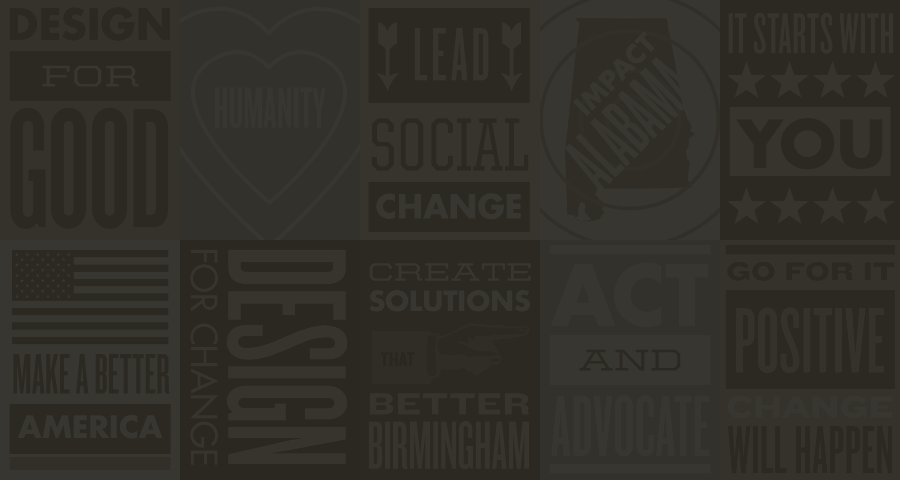
<style>
.page{position:relative;width:900px;height:480px;background:#2c2923}
.page>*{position:absolute;margin:0}
.t1{font:41.7px "FuturaStd-Bold";letter-spacing:0.005em;color:#2c2923;text-transform:uppercase}
.t2{font:60px "Knockout-46Flyweight";letter-spacing:0.005em;color:#37342e;text-transform:uppercase}
.t3{font:78.7px "Knockout-46Flyweight";letter-spacing:0.05em;color:#37342e;text-transform:uppercase}
.t4{font:25.9px "FuturaStd-Bold";letter-spacing:0.005em;color:#383630;text-transform:uppercase}
.t5{font:30px "UnitedSerifExt-Medium";letter-spacing:0.005em;color:#383630;text-transform:uppercase}
.t6{font:84.8px "Knockout-46Flyweight";letter-spacing:0.005em;color:#383630;text-transform:uppercase}
.t7{font:60px "Knockout-46Flyweight";letter-spacing:0.005em;color:#383630;text-transform:uppercase}
.t8{font:176.9px "Knockout-46Flyweight";letter-spacing:0.005em;color:#2c2923;text-transform:uppercase}
.t9{font:75.4px "UnitedSerifCond-Medium";letter-spacing:0.005em;color:#2c2923;text-transform:uppercase}
.t10{font:64.1px "FuturaStd-Bold";letter-spacing:0.005em;color:#2c2923;text-transform:uppercase}
.t11{font:32.5px "FuturaStd-Bold";letter-spacing:0.005em;color:#383630;text-transform:uppercase}
.t12{font:35.4px "FuturaStd-Medium";letter-spacing:0.005em;color:#37342e;text-transform:uppercase}
.t13{font:176px "Knockout-46Flyweight";letter-spacing:0.005em;color:#37342e;text-transform:uppercase}
.t14{font:25.3px "UnitedSerifExt-Medium";letter-spacing:0.005em;color:#383630;text-transform:uppercase}
.t15{font:81.9px "FuturaStd-Bold";letter-spacing:0.005em;color:#383630;text-transform:uppercase}
.t16{font:26.7px "Knockout-54Sumo";color:#2c2923;text-transform:uppercase}
.t17{font:27.1px "FuturaStd-Bold";letter-spacing:0.005em;color:#383630;text-transform:uppercase}
.t18{font:96.4px "Knockout-46Flyweight";letter-spacing:0.005em;color:#35322c;text-transform:uppercase}
.t19{font:20.6px "Knockout-49Liteweight";color:#292721;text-transform:uppercase}
.t20{font:30px "UnitedSerifExt-Medium";letter-spacing:0.005em;color:#2c2923;text-transform:uppercase}
.t21{font:59.5px "Knockout-46Flyweight";color:#2c2923;text-transform:uppercase}
.t22{font:31.8px "Knockout-54Sumo";color:#37342e;text-transform:uppercase}
.t23{font:90.2px "Knockout-46Flyweight";letter-spacing:0.005em;color:#383630;text-transform:uppercase}
.t24{font:30.1px "FuturaStd-Bold";letter-spacing:0.005em;color:#383630;text-transform:uppercase}
.t25{font:70.9px "Knockout-46Flyweight";color:#37342e;text-transform:uppercase}
.t26{font:70.9px "Knockout-46Flyweight";letter-spacing:0.005em;color:#2c2923;text-transform:uppercase}
</style>
<div class="page">
<p class="t1" style="left:9px;top:7px;width:161px;height:34px">Design</p>
<p class="t2" style="left:728px;top:12px;width:165px;height:42px">It Starts with</p>
<p class="t3" style="left:414px;top:28px;width:75px;height:53px">lead</p>
<p class="t4" style="left:573px;top:31px;width:82px;height:85px;rotate:-45deg">Impact</p>
<p class="t5" style="left:42px;top:65px;width:97px;height:22px">for</p>
<p class="t6" style="left:564px;top:57px;width:136px;height:135px;rotate:-45deg">ALABAMA</p>
<p class="t7" style="left:215px;top:87px;width:111px;height:41px">Humanity</p>
<p class="t8" style="left:10px;top:107px;width:159px;height:122px">GOOD</p>
<p class="t9" style="left:371px;top:118px;width:158px;height:53px">Social</p>
<p class="t10" style="left:736px;top:118px;width:147px;height:52px">You</p>
<p class="t11" style="left:376px;top:193px;width:145px;height:27px">Change</p>
<p class="t12" style="left:189px;top:249px;width:30px;height:216px;rotate:90deg">For Change</p>
<p class="t13" style="left:226px;top:249px;width:122px;height:216px;rotate:90deg">Design</p>
<p class="t14" style="left:369px;top:263px;width:162px;height:18px">create</p>
<p class="t15" style="left:550px;top:262px;width:159px;height:66px">ACT</p>
<p class="t16" style="left:727px;top:262px;width:168px;height:19px">Go for it</p>
<p class="t17" style="left:369px;top:290px;width:161px;height:22px">Solutions</p>
<p class="t18" style="left:736px;top:307px;width:149px;height:67px">Positive</p>
<p class="t19" style="left:381px;top:352px;width:34px;height:14px">THAT</p>
<p class="t20" style="left:579px;top:349px;width:102px;height:22px">And</p>
<p class="t21" style="left:13px;top:354px;width:157px;height:40px">Make a better</p>
<p class="t22" style="left:369px;top:393px;width:161px;height:22px">Better</p>
<p class="t23" style="left:551px;top:395px;width:159px;height:62px">Advocate</p>
<p class="t24" style="left:17px;top:414px;width:146px;height:25px">America</p>
<p class="t25" style="left:368px;top:421px;width:161px;height:49px">Birmingham</p>
<p class="t26" style="left:728px;top:426px;width:164px;height:48px">Will Happen</p>
</div>
